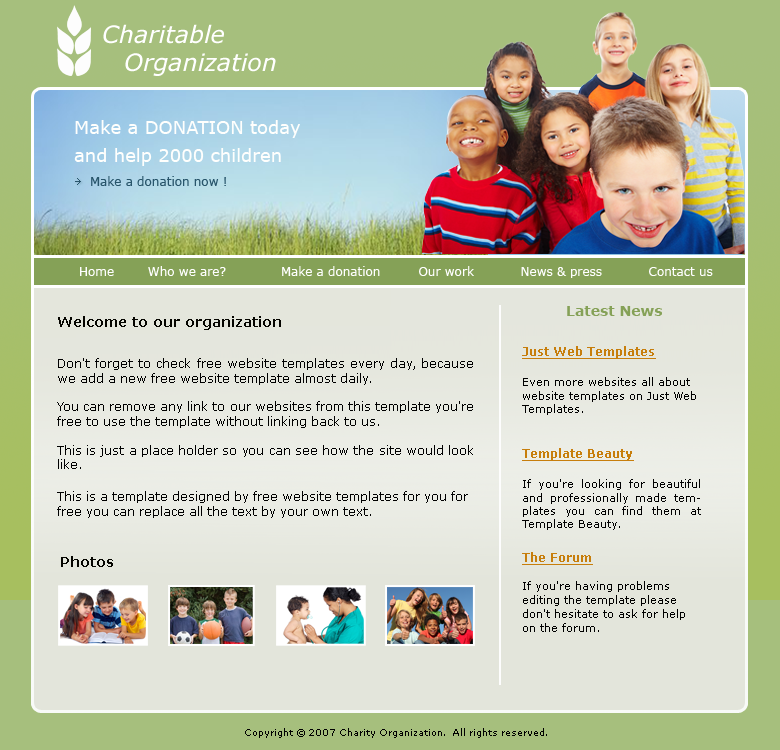
<style>
.page{position:relative;width:780px;height:750px}
.page>*{position:absolute;margin:0}
.t1{font:24px "Verdana-Italic";color:#ffffff}
.t2{font:18px/28px "Verdana";color:#fffffd}
.t3{font:18px/28px "Verdana";color:#fffffd;text-transform:uppercase}
.t4{font:12px "Verdana";color:#28556b}
.t5{font:12px "Verdana";color:#ffffff}
.t6{font:14px "Verdana-Bold";color:#050500}
.t7{font:14px "Verdana-Bold";color:#85a157}
.t8{font:12px "Verdana-Bold";color:#c77e0c;text-decoration:underline}
.t9{font:12px "Verdana";color:#000000}
.t10{font:11px "Verdana";color:#000000}
.t11{font:11px "Verdana";color:#010101}
.t12{font:11px/14px "Verdana";color:#000000}
.t13{font:9px "Verdana";color:#000000}
</style>
<div class="page">
<p class="t1" style="left:103px;top:24px;width:121px;height:20px">Charitable</p>
<p class="t1" style="left:125px;top:53px;width:151px;height:23px">Organization</p>
<p class="t2" style="left:74px;top:120px;width:226px;height:46px">Make a <span class="t3">donation</span> today<br>and help 2000 children</p>
<p class="t4" style="left:91px;top:176px;width:135px;height:10px">Make a donation now !</p>
<p class="t5" style="left:80px;top:266px;width:633px;height:12px">Home        Who we are?             Make a donation         Our work           News &amp; press           Contact us</p>
<p class="t6" style="left:58px;top:316px;width:223px;height:14px">Welcome to our organization</p>
<p class="t7" style="left:567px;top:306px;width:95px;height:10px">Latest News</p>
<p class="t8" style="left:522px;top:346px;width:134px;height:13px">Just Web Templates</p>
<p class="t9" style="left:57px;top:358px;width:416px;height:160px;text-align:justify">Don't forget to check free website templates every day, because we add a new free website template almost daily.<br><br>You can remove any link to our websites from this template you're free to use the template without linking back to us.<br><br>This is just a place holder so you can see how the site would look like.<br><br>This is a template designed by free website templates for you for free you can replace all the text by your own text.</p>
<p class="t10" style="left:522px;top:377px;width:174px;height:38px">Even more websites all about website templates on Just Web Templates.</p>
<p class="t8" style="left:522px;top:448px;width:112px;height:13px">Template Beauty</p>
<p class="t11" style="left:522px;top:479px;width:179px;height:51px;text-align:justify">If you're looking for beautiful and professionally made templates you can find them at Template Beauty.</p>
<p class="t6" style="left:61px;top:556px;width:52px;height:11px">Photos</p>
<p class="t8" style="left:522px;top:552px;width:71px;height:13px">The Forum</p>
<p class="t12" style="left:523px;top:581px;width:162px;height:51px">If you're having problems editing the template please don't hesitate to ask for help on the forum.</p>
<p class="t13" style="left:245px;top:728px;width:302px;height:10px">Copyright © 2007 Charity Organization.  All rights reserved.</p>
</div>
